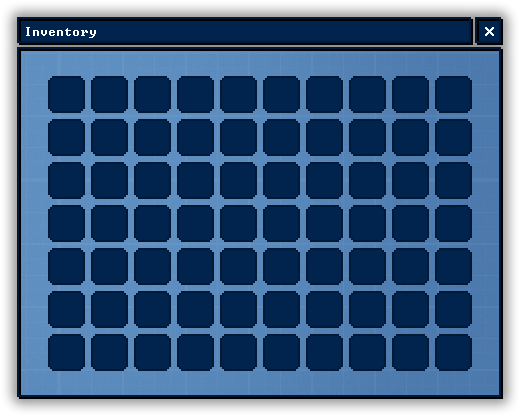
<style>
.page{position:relative;width:520px;height:416px;background:#00244d}
.page>*{position:absolute;margin:0}
.t1{font:12px "Terminal";color:#ffffff}
.t2{font:16px "Terminal";color:#ffffff}
</style>
<div class="page">
<p class="t1" style="left:26px;top:27px;width:70px;height:11px">Inventory</p>
<p class="t1" style="left:26px;top:27px;width:70px;height:11px">Inventory</p>
<p class="t2" style="left:485px;top:27px;width:9px;height:9px">x</p>
<p class="t2" style="left:485px;top:27px;width:9px;height:9px">x</p>
</div>
